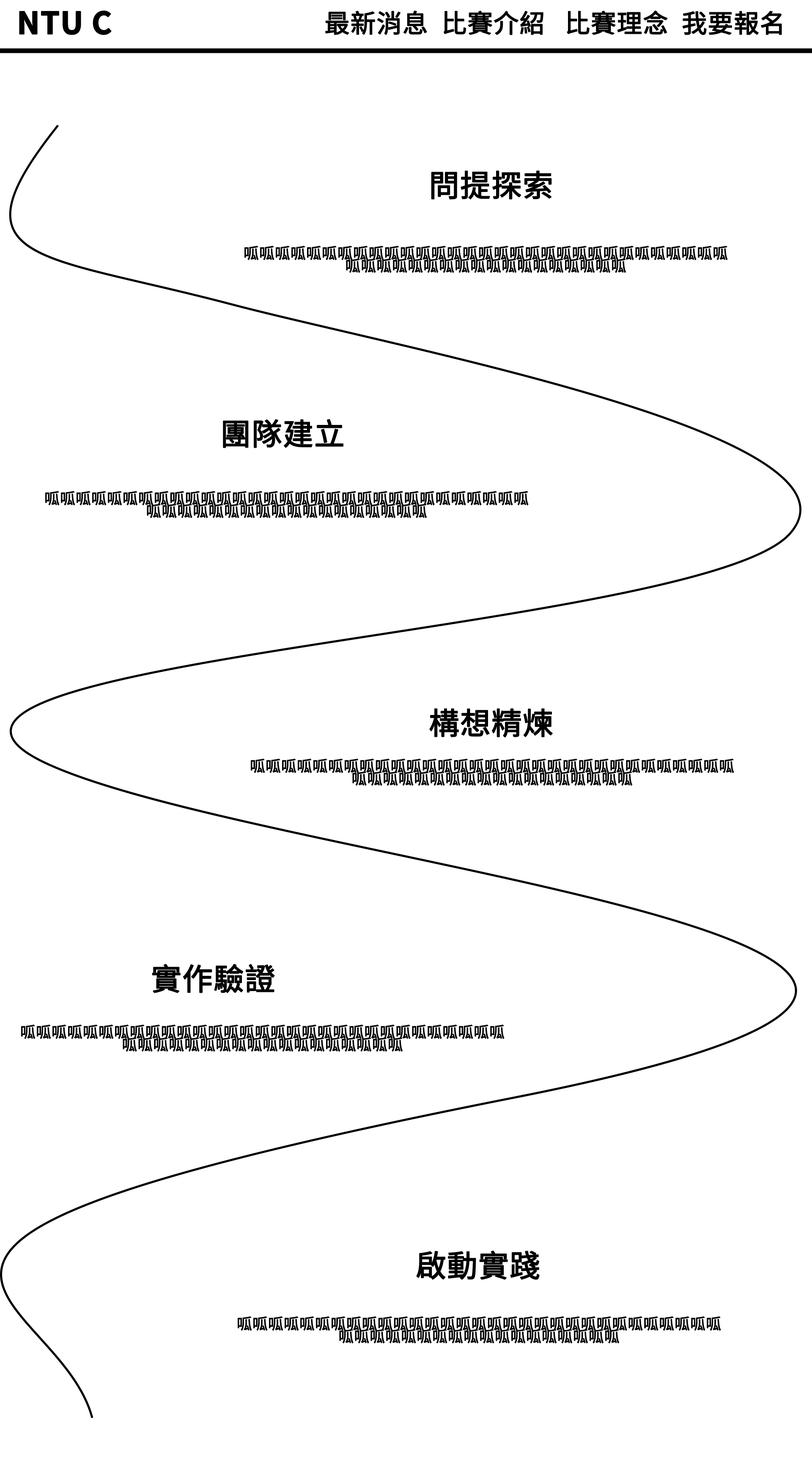
<style>
.page{position:relative;width:812px;height:1468px;background:#ffffff}
.page>*{position:absolute;margin:0}
.t1{font:30.5px "NotoSansCJKtc-Bold";color:#000000;font-weight:bold}
.t2{font:25.4px "NotoSansCJKtc-Regular";color:#000000;font-weight:bold}
.t3{font:30.5px "NotoSansCJKtc-Regular";color:#000000;font-weight:bold}
.t4{font:15.2px/12.7px "NotoSansCJKtc-Regular";color:#000000;font-weight:bold}
</style>
<div class="page">
<p class="t1" style="left:19px;top:11px;width:93px;height:24px">NTU C</p>
<p class="t2" style="left:325px;top:10px;width:457px;height:25px">最新消息  比賽介紹   比賽理念  我要報名</p>
<p class="t3" style="left:431px;top:170px;width:121px;height:30px">問提探索</p>
<p class="t4" style="left:244px;top:246px;width:484px;height:27px;text-align:center">呱呱呱呱呱呱呱呱呱呱呱呱呱呱呱呱呱呱呱呱呱呱呱呱呱呱呱呱呱呱呱呱呱呱呱呱呱呱呱呱呱呱呱呱呱呱呱呱呱</p>
<p class="t3" style="left:223px;top:419px;width:120px;height:29px">團隊建立</p>
<p class="t4" style="left:45px;top:491px;width:484px;height:28px;text-align:center">呱呱呱呱呱呱呱呱呱呱呱呱呱呱呱呱呱呱呱呱呱呱呱呱呱呱呱呱呱呱呱呱呱呱呱呱呱呱呱呱呱呱呱呱呱呱呱呱呱</p>
<p class="t3" style="left:429px;top:708px;width:124px;height:30px">構想精煉</p>
<p class="t4" style="left:251px;top:759px;width:483px;height:27px;text-align:center">呱呱呱呱呱呱呱呱呱呱呱呱呱呱呱呱呱呱呱呱呱呱呱呱呱呱呱呱呱呱呱呱呱呱呱呱呱呱呱呱呱呱呱呱呱呱呱呱呱</p>
<p class="t3" style="left:152px;top:964px;width:123px;height:29px">實作驗證</p>
<p class="t4" style="left:21px;top:1025px;width:484px;height:27px;text-align:center">呱呱呱呱呱呱呱呱呱呱呱呱呱呱呱呱呱呱呱呱呱呱呱呱呱呱呱呱呱呱呱呱呱呱呱呱呱呱呱呱呱呱呱呱呱呱呱呱呱</p>
<p class="t3" style="left:416px;top:1251px;width:124px;height:29px">啟動實踐</p>
<p class="t4" style="left:238px;top:1317px;width:483px;height:27px;text-align:center">呱呱呱呱呱呱呱呱呱呱呱呱呱呱呱呱呱呱呱呱呱呱呱呱呱呱呱呱呱呱呱呱呱呱呱呱呱呱呱呱呱呱呱呱呱呱呱呱呱</p>
</div>
